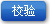
<style>
.page{position:relative;width:50px;height:24px}
.page>*{position:absolute;margin:0}
.t1{font:12px "SimSun";color:#ffffff}
</style>
<div class="page">
<p class="t1" style="left:12px;top:5px;width:23px;height:11px">校验</p>
</div>
